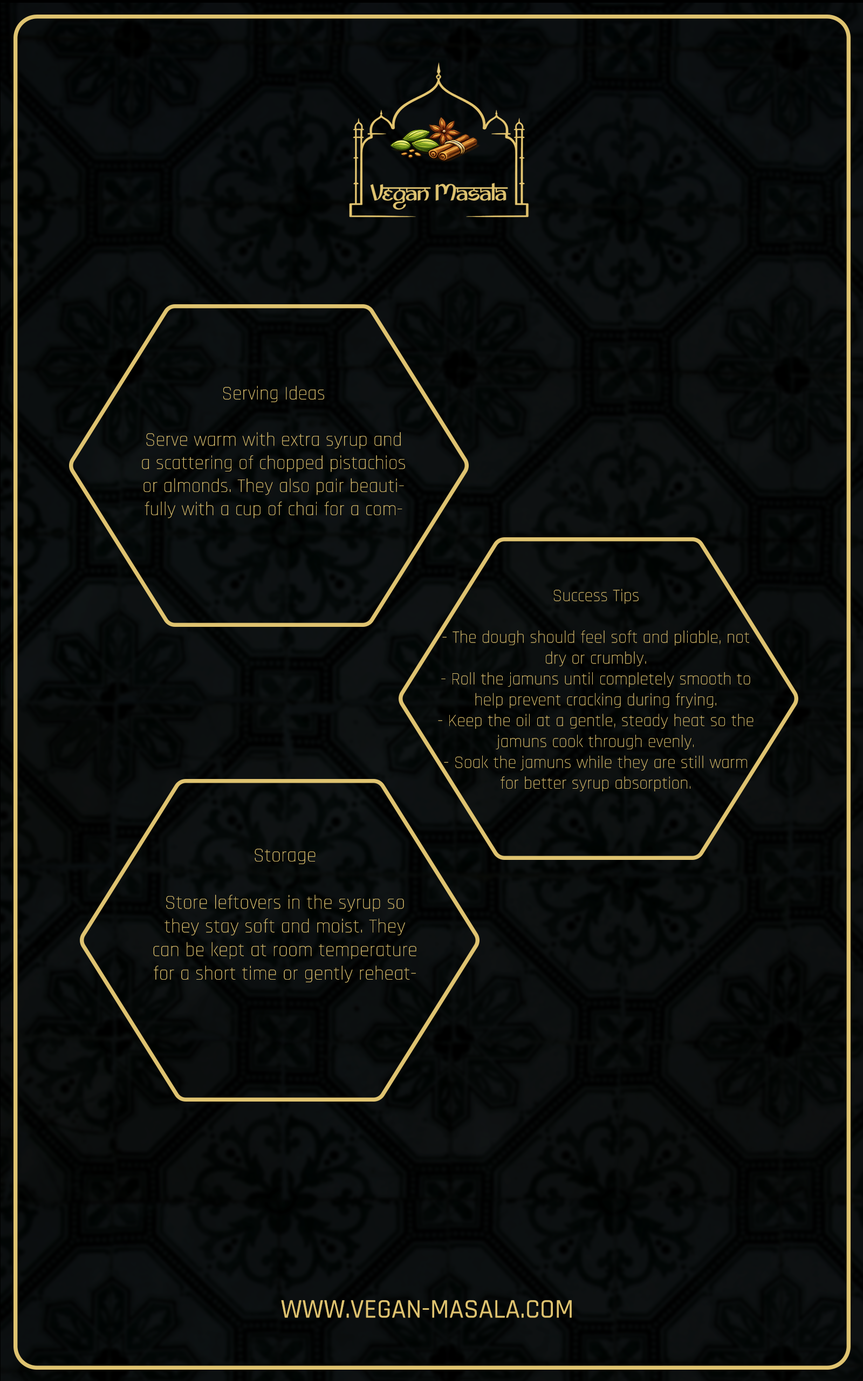
<style>
.page{position:relative;width:863px;height:1381px}
.page>*{position:absolute;margin:0}
.t1{font:19.3px "Rajdhani-Light";color:#dfc370}
.t2{font:17.4px "Rajdhani-Light";color:#dfc370}
.t3{font:19.7px "Rajdhani-Light";color:#dfc370}
.t4{font:27px "Rajdhani-Medium";color:#dfc370}
</style>
<div class="page">
<p class="t1" style="left:142px;top:386px;width:263px;height:133px;text-align:center">Serving Ideas<br><br>Serve warm with extra syrup and a scattering of chopped pistachios or almonds. They also pair beautifully with a cup of chai for a comforting dessert.</p>
<p class="t2" style="left:438px;top:589px;width:316px;height:203px;text-align:center">Success Tips<br><br>- The dough should feel soft and pliable, not dry or crumbly.<br>- Roll the jamuns until completely smooth to help prevent cracking during frying.<br>- Keep the oil at a gentle, steady heat so the jamuns cook through evenly.<br>- Soak the jamuns while they are still warm for better syrup absorption.</p>
<p class="t3" style="left:153px;top:849px;width:264px;height:134px;text-align:center">Storage<br><br>Store leftovers in the syrup so they stay soft and moist. They can be kept at room temperature for a short time or gently reheated before serving.</p>
<p class="t4" style="left:281px;top:1300px;width:291px;height:18px">WWW.VEGAN-MASALA.COM</p>
</div>
